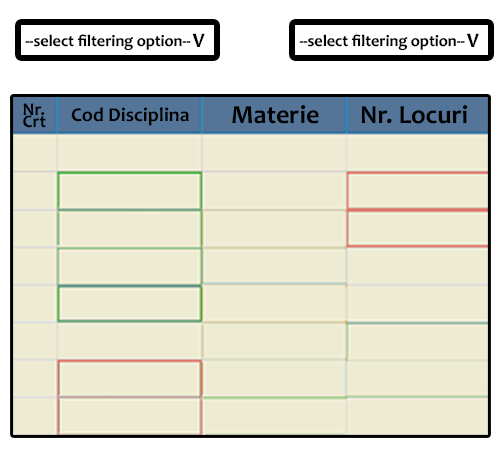
<style>
.page{position:relative;width:500px;height:450px;background:#eeebd3}
.page>*{position:absolute;margin:0}
.t1{font:16.4px "Candara-Bold";color:#000000}
.t2{font:20.8px "Candara-Bold";color:#000000}
.t3{font:18.1px/12px "Candara-Bold";color:#000000}
.t4{font:19.7px "Candara-Bold";color:#000000}
.t5{font:26.1px "Candara-Bold";color:#000000}
</style>
<div class="page">
<p class="t1" style="left:25px;top:34px;width:166px;height:17px">--select filtering option--</p>
<p class="t2" style="left:192px;top:33px;width:13px;height:14px">V</p>
<p class="t1" style="left:299px;top:34px;width:166px;height:17px">--select filtering option--</p>
<p class="t2" style="left:467px;top:33px;width:12px;height:14px">V</p>
<p class="t3" style="left:23px;top:103px;width:23px;height:25px">Nr.<br>Crt</p>
<p class="t4" style="left:71px;top:107px;width:118px;height:19px">Cod Disciplina</p>
<p class="t5" style="left:232px;top:105px;width:87px;height:19px">Materie</p>
<p class="t5" style="left:361px;top:105px;width:107px;height:19px">Nr. Locuri</p>
</div>
